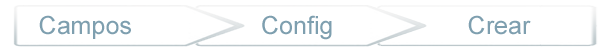
<style>
.page{position:relative;width:600px;height:50px;background:#ffffff}
.page>*{position:absolute;margin:0}
.t1{font:25px "ArialMT";color:#7e9faf}
</style>
<div class="page">
<p class="t1" style="left:39px;top:15px;width:92px;height:24px">Campos</p>
<p class="t1" style="left:262px;top:15px;width:70px;height:25px">Config</p>
<p class="t1" style="left:468px;top:15px;width:63px;height:20px">Crear</p>
</div>
